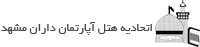
<style>
.page{position:relative;width:200px;height:47px;background:#ffffff}
.page>*{position:absolute;margin:0}
.t1{font:12.3px "BYekan";color:#474747}
</style>
<div class="page">
<p class="t1" style="left:1px;top:22px;width:151px;height:13px">اتحادیه هتل آپارتمان داران مشهد</p>
</div>
